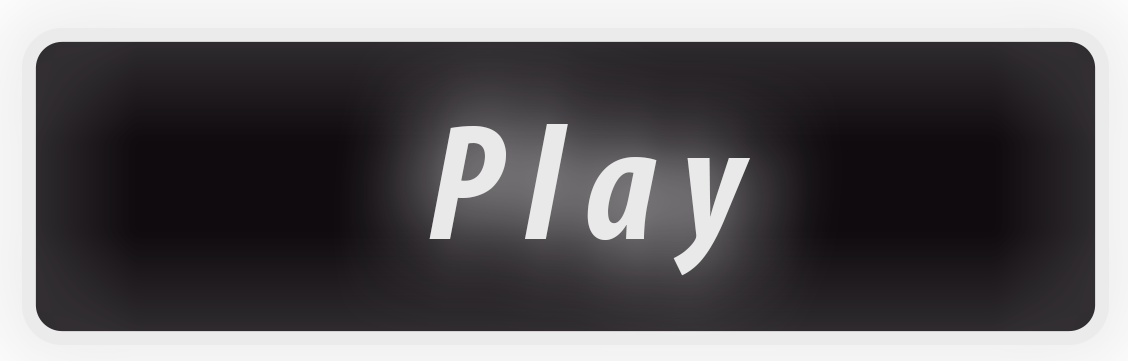
<style>
.page{position:relative;width:1128px;height:361px}
.page>*{position:absolute;margin:0}
.t1{font:166.7px "MyriadPro-BoldCondIt";color:#e9e9e9}
</style>
<div class="page">
<p class="t1" style="left:429px;top:124px;width:321px;height:152px">P l a y</p>
</div>
